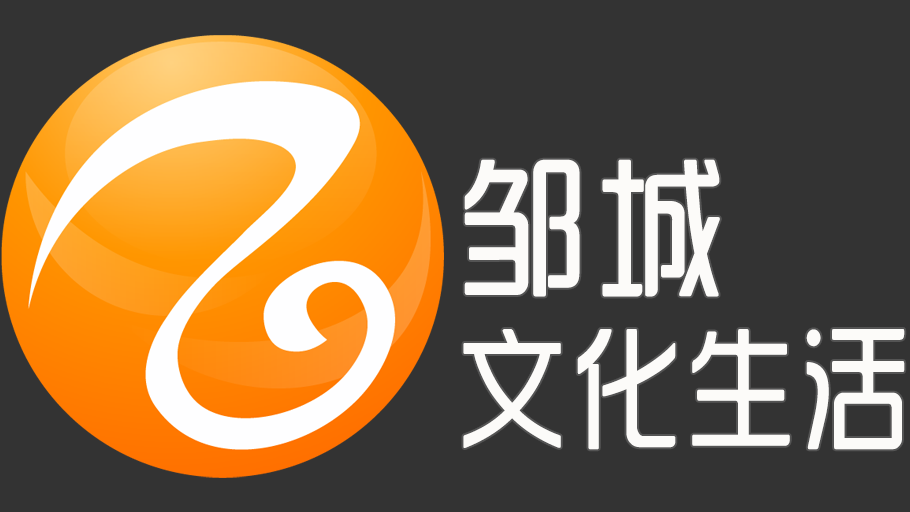
<style>
.page{position:relative;width:910px;height:512px;background:#333333}
.page>*{position:absolute;margin:0}
.t1{font:132px/170px "SJyunlvyuan";letter-spacing:0.02em;color:#fcfbf9;scale:0.85 1}
.t2{font:150px/170px "SJyunlvyuan";letter-spacing:0.02em;color:#fcfbf9;scale:0.9 1}
</style>
<div class="page">
<p class="t1" style="left:463px;top:159px;width:442px;height:291px"><span class="t2">邹城<br></span>文化生活</p>
</div>
